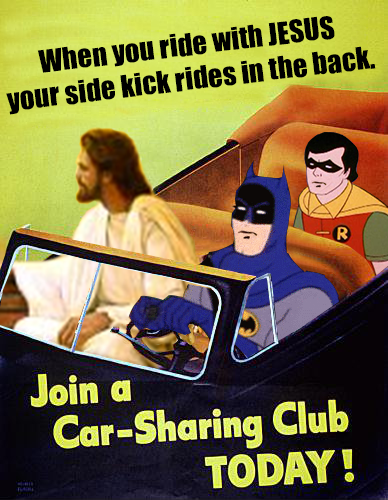
<style>
.page{position:relative;width:388px;height:500px}
.page>*{position:absolute;margin:0}
.t1{font:28.8px "Impact";color:#000000}
</style>
<div class="page">
<p class="t1" style="left:6px;top:16px;width:370px;height:99px;text-align:center;rotate:-7deg">When you ride with JESUS<br>your side kick rides in the back.</p>
</div>
